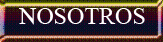
<style>
.page{position:relative;width:163px;height:42px}
.page>*{position:absolute;margin:0}
.t1{font:24px "TimesNewRomanPSMT";color:#ffffff}
</style>
<div class="page">
<p class="t1" style="left:19px;top:4px;width:127px;height:27px">NOSOTROS</p>
</div>
